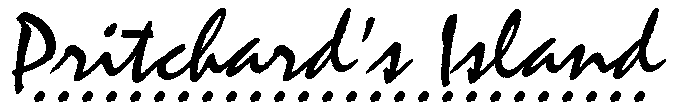
<style>
.page{position:relative;width:673px;height:109px;background:#ffffff}
.page>*{position:absolute;margin:0}
.t1{font:100px "Staccato222BT-Regular";color:#000000}
</style>
<div class="page">
<p class="t1" style="left:12px;top:8px;width:654px;height:86px">Pritchard’s Island</p>
<p class="t1" style="left:34px;top:91px;width:611px;height:11px">..........................</p>
</div>
